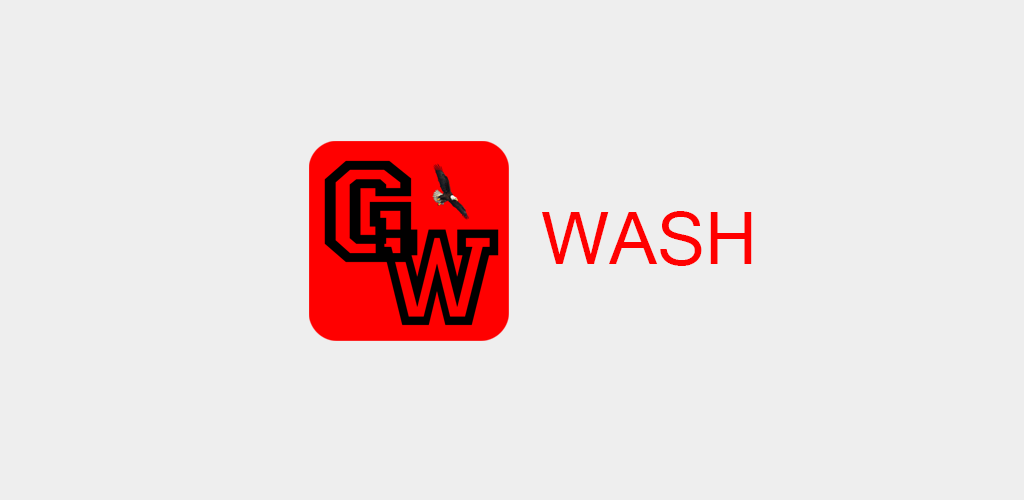
<style>
.page{position:relative;width:1024px;height:500px;background:#eeeeee}
.page>*{position:absolute;margin:0}
.t1{font:80px "Latha";color:#ff0000}
</style>
<div class="page">
<p class="t1" style="left:542px;top:211px;width:210px;height:55px">WASH</p>
</div>
